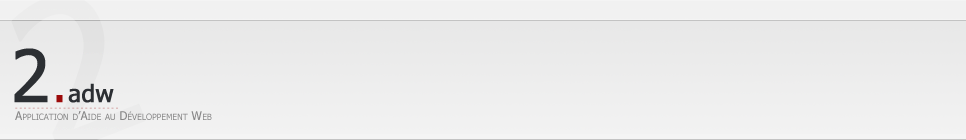
<style>
.page{position:relative;width:966px;height:140px}
.page>*{position:absolute;margin:0}
.t1{font:24px "Tahoma";color:#2c2f33;font-weight:bold}
.t2{font:72px "Tahoma";color:#2c2f33;font-weight:bold}
.t3{font:48px "Tahoma";color:#9c0a0a;font-weight:bold}
.t4{font:6px "Tahoma";font-weight:bold}
.t5{font:12px "Tahoma";color:#898888;font-variant:small-caps}
</style>
<div class="page">
<p class="t1" style="left:14px;top:48px;width:100px;height:55px"><span class="t2">2</span><span class="t3">.</span>adw</p>
<p class="t4" style="left:15px;top:107px;width:103px;height:2px">- - - - - - - - - - - - - - - - - - - - - - - -</p>
<p class="t5" style="left:15px;top:111px;width:197px;height:9px">Application d’Aide au Développement Web</p>
</div>
